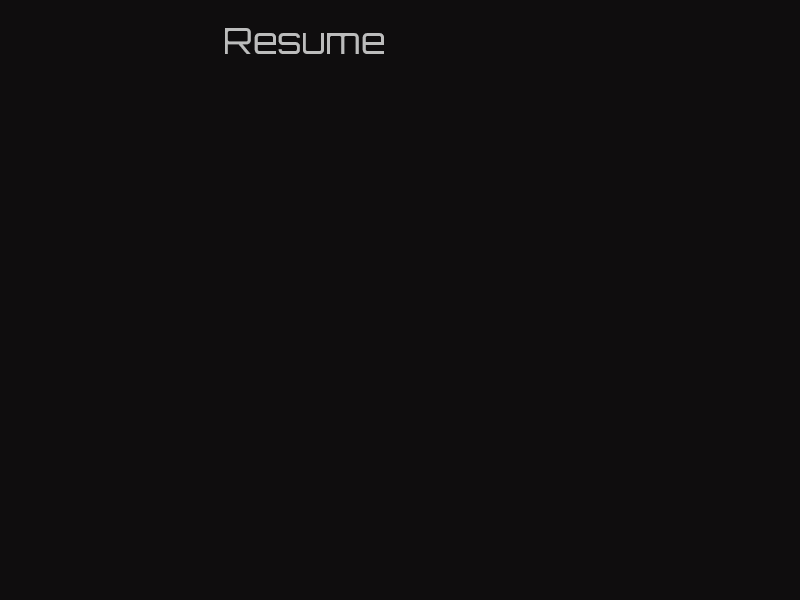
<style>
.page{position:relative;width:800px;height:600px;background:#0f0d0e}
.page>*{position:absolute;margin:0}
.t1{font:36px "Orbitron-Regular";color:#bcbcbc}
</style>
<div class="page">
<p class="t1" style="left:225px;top:28px;width:159px;height:26px">Resume</p>
</div>
